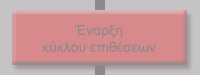
<style>
.page{position:relative;width:200px;height:75px;background:#d7898b}
.page>*{position:absolute;margin:0}
.t1{font:14px "ArialMT";color:#8b898b}
</style>
<div class="page">
<p class="t1" style="left:43px;top:25px;width:113px;height:27px;text-align:center">Έναρξη<br>κύκλου επιθέσεων</p>
</div>
